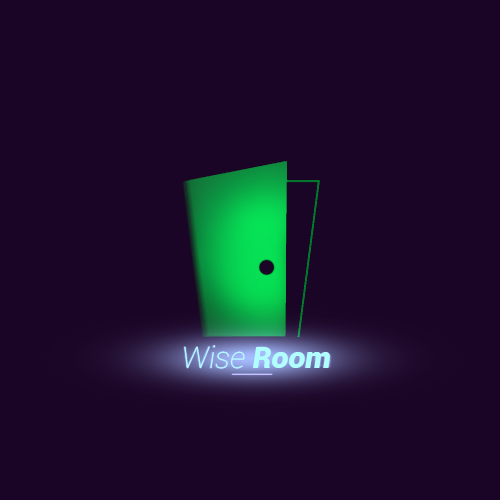
<style>
.page{position:relative;width:500px;height:500px;background:#1b0526}
.page>*{position:absolute;margin:0}
.t1{font:30px "Roboto-ThinItalic";color:#b1feff}
.t2{font:30px "Roboto-BlackItalic";color:#b1feff}
</style>
<div class="page">
<p class="t1" style="left:184px;top:345px;width:146px;height:24px">Wise <span class="t2">Room</span></p>
<p class="t1" style="left:184px;top:345px;width:146px;height:24px">Wise <span class="t2">Room</span></p>
</div>
